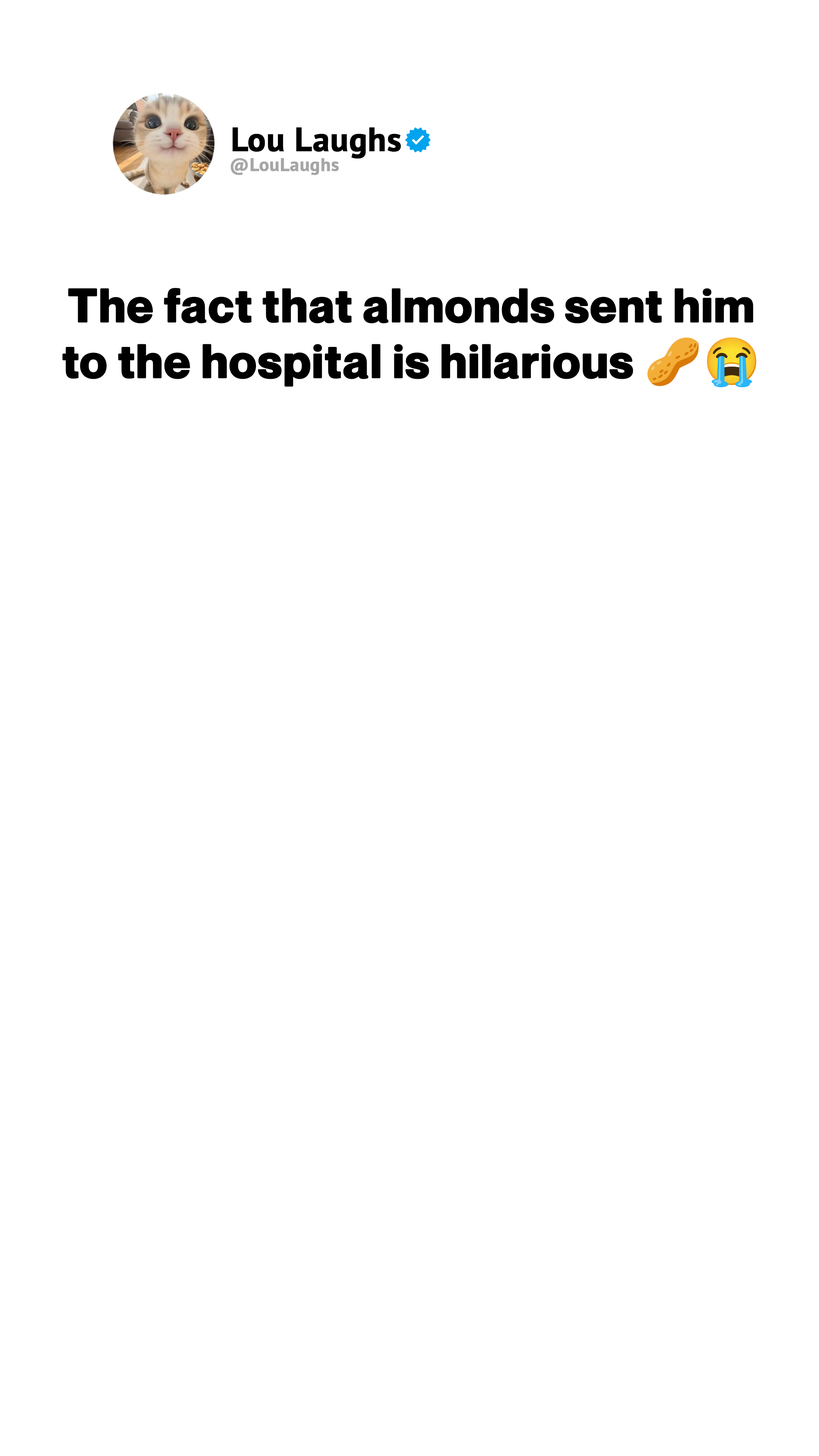
<style>
.page{position:relative;width:819px;height:1456px;background:#ffffff}
.page>*{position:absolute;margin:0}
.t1{font:33.4px "PTSans-Bold";color:#000000;font-weight:bold}
.t2{font:18.2px "PTSans-Bold";letter-spacing:0.01em;color:#a6a6a6;font-weight:bold}
.t3{font:46.3px "NeueMontreal-Bold";letter-spacing:0.01em;color:#000000;font-weight:bold}
.t4{font:46.3px "NotoColorEmoji-SVG";letter-spacing:0.01em;color:#000000;font-weight:bold}
</style>
<div class="page">
<p class="t1" style="left:232px;top:127px;width:169px;height:31px">Lou Laughs</p>
<p class="t2" style="left:231px;top:158px;width:108px;height:17px">@LouLaughs</p>
<p class="t3" style="left:62px;top:288px;width:694px;height:100px;text-align:center">The fact that almonds sent him<br>to the hospital is hilarious <span class="t4">🥜😭</span></p>
</div>
